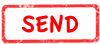
<style>
.page{position:relative;width:100px;height:44px;background:#ffffff}
.page>*{position:absolute;margin:0}
.t1{font:26.2px "AppleCasual";color:#ff0000}
</style>
<div class="page">
<p class="t1" style="left:22px;top:14px;width:56px;height:19px">SEND</p>
</div>
